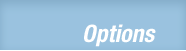
<style>
.page{position:relative;width:186px;height:51px;background:#9ac2df}
.page>*{position:absolute;margin:0}
.t1{font:24px "HelveticaNeueLTPro-BdCnO";color:#ffffff}
</style>
<div class="page">
<p class="t1" style="left:84px;top:24px;width:72px;height:23px">Options</p>
</div>
